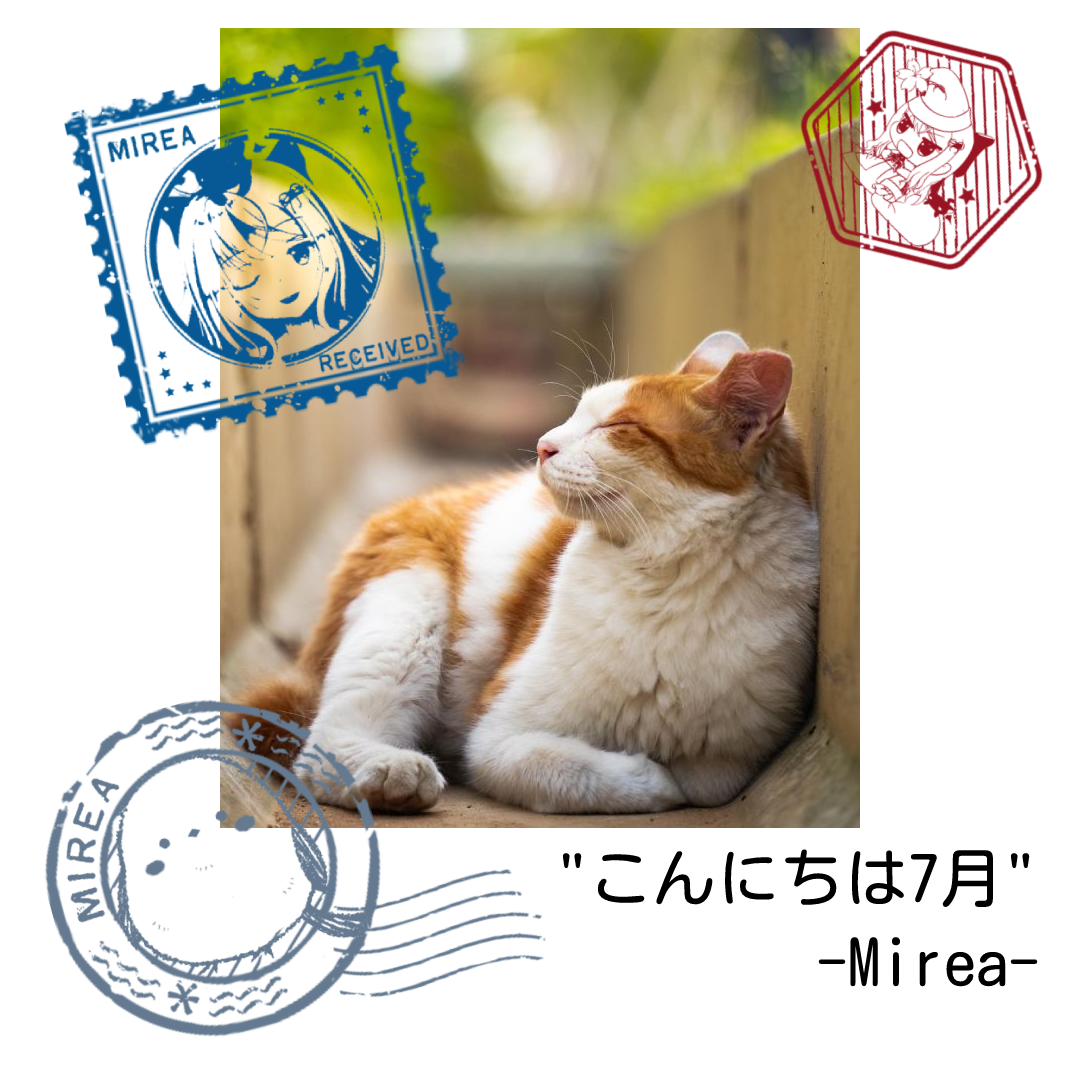
<style>
.page{position:relative;width:1080px;height:1080px;background:#ffffff}
.page>*{position:absolute;margin:0}
.t1{font:64px "MotoyaLMaru-W3-90ms-RKSJ-H";color:#000000}
</style>
<div class="page">
<p class="t1" style="left:562px;top:849px;width:468px;height:59px">"こんにちは7月"</p>
<p class="t1" style="left:818px;top:937px;width:220px;height:50px">-Mirea-</p>
</div>
